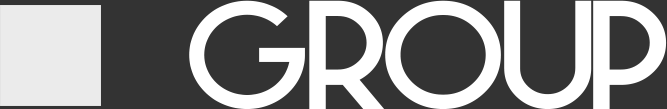
<style>
.page{position:relative;width:667px;height:109px;background:#333333}
.page>*{position:absolute;margin:0}
.t1{font:135.5px "AlpacaScarlettDemo";letter-spacing:-0.04em;color:#ffffff;scale:1.07 1}
</style>
<div class="page">
<p class="t1" style="left:189px;top:0px;width:478px;height:109px">GROUP</p>
</div>
